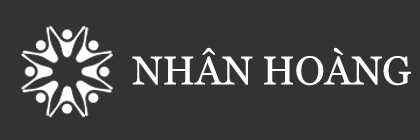
<style>
.page{position:relative;width:420px;height:140px;background:#333333}
.page>*{position:absolute;margin:0}
.t1{font:40px "Georgia";color:#fbfefb}
</style>
<div class="page">
<p class="t1" style="left:132px;top:47px;width:279px;height:39px">NHÂN HOÀNG</p>
</div>
